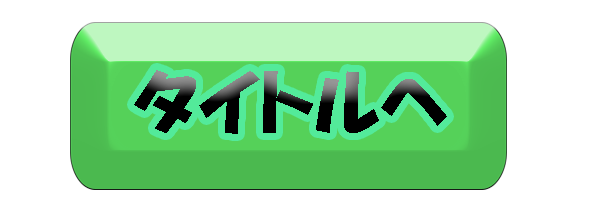
<style>
.page{position:relative;width:600px;height:200px;background:#ffffff}
.page>*{position:absolute;margin:0}
.t1{font:72px "HGPSoeiKakupoptai";color:#000000}
</style>
<div class="page">
<p class="t1" style="left:134px;top:70px;width:313px;height:64px">タイトルへ</p>
</div>
